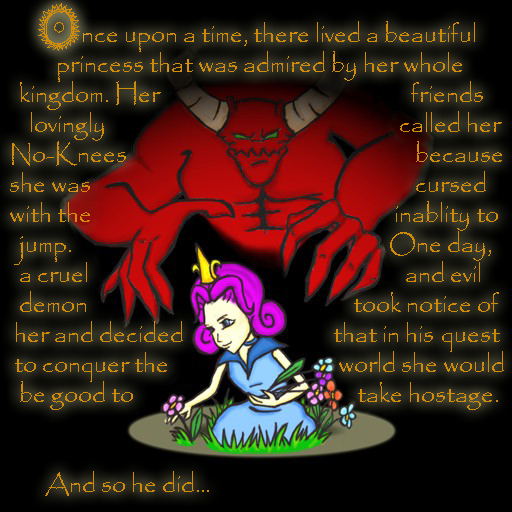
<style>
.page{position:relative;width:512px;height:512px}
.page>*{position:absolute;margin:0}
.t1{font:25px/30px "Papyrus-Regular";color:#d18b07}
</style>
<div class="page">
<p class="t1" style="left:10px;top:21px;width:494px;height:475px">nce upon a time, there lived a beautiful<br>         princess that was admired by her whole<br>  kingdom. Her                                                  friends<br>    lovingly                                                          called her<br>No-Knees                                                         because<br>she was                                                                 cursed<br>with the                                                            inablity to<br>  jump.                                                               One day,<br>  a cruel                                                               and evil<br>  demon                                                     took notice of<br> her and decided                              that in his quest<br> to conquer the                                  world she would<br>  be good to                                            take hostage.<br><br><br>       And so he did...</p>
<p class="t1" style="left:10px;top:21px;width:494px;height:475px">nce upon a time, there lived a beautiful<br>         princess that was admired by her whole<br>  kingdom. Her                                                  friends<br>    lovingly                                                          called her<br>No-Knees                                                         because<br>she was                                                                 cursed<br>with the                                                            inablity to<br>  jump.                                                               One day,<br>  a cruel                                                               and evil<br>  demon                                                     took notice of<br> her and decided                              that in his quest<br> to conquer the                                  world she would<br>  be good to                                            take hostage.<br><br><br>       And so he did...</p>
</div>
